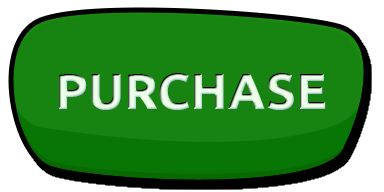
<style>
.page{position:relative;width:384px;height:192px;background:#178310}
.page>*{position:absolute;margin:0}
.t1{font:51.2px "Ubuntu-Bold";color:#ecffe8}
</style>
<div class="page">
<p class="t1" style="left:59px;top:73px;width:267px;height:37px">PURCHASE</p>
</div>
